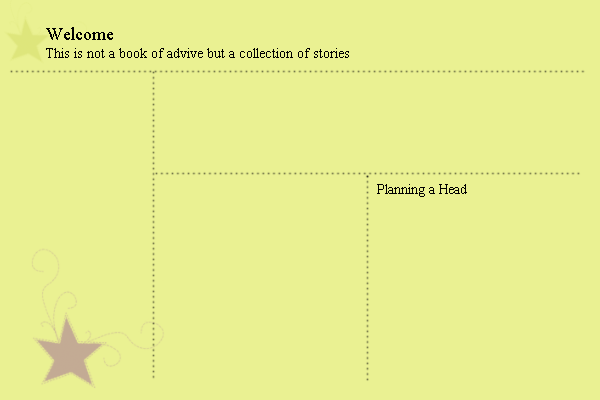
<style>
.page{position:relative;width:600px;height:400px;background:#eaf192}
.page>*{position:absolute;margin:0}
.t1{font:18px "TimesNewRomanPSMT";color:#000000}
.t2{font:14px "TimesNewRomanPSMT";color:#000000}
</style>
<div class="page">
<p class="t1" style="left:46px;top:27px;width:67px;height:13px">Welcome</p>
<p class="t2" style="left:46px;top:48px;width:303px;height:10px">This is not a book of advive but a collection of stories</p>
<p class="t2" style="left:377px;top:184px;width:90px;height:13px">Planning a Head</p>
</div>
